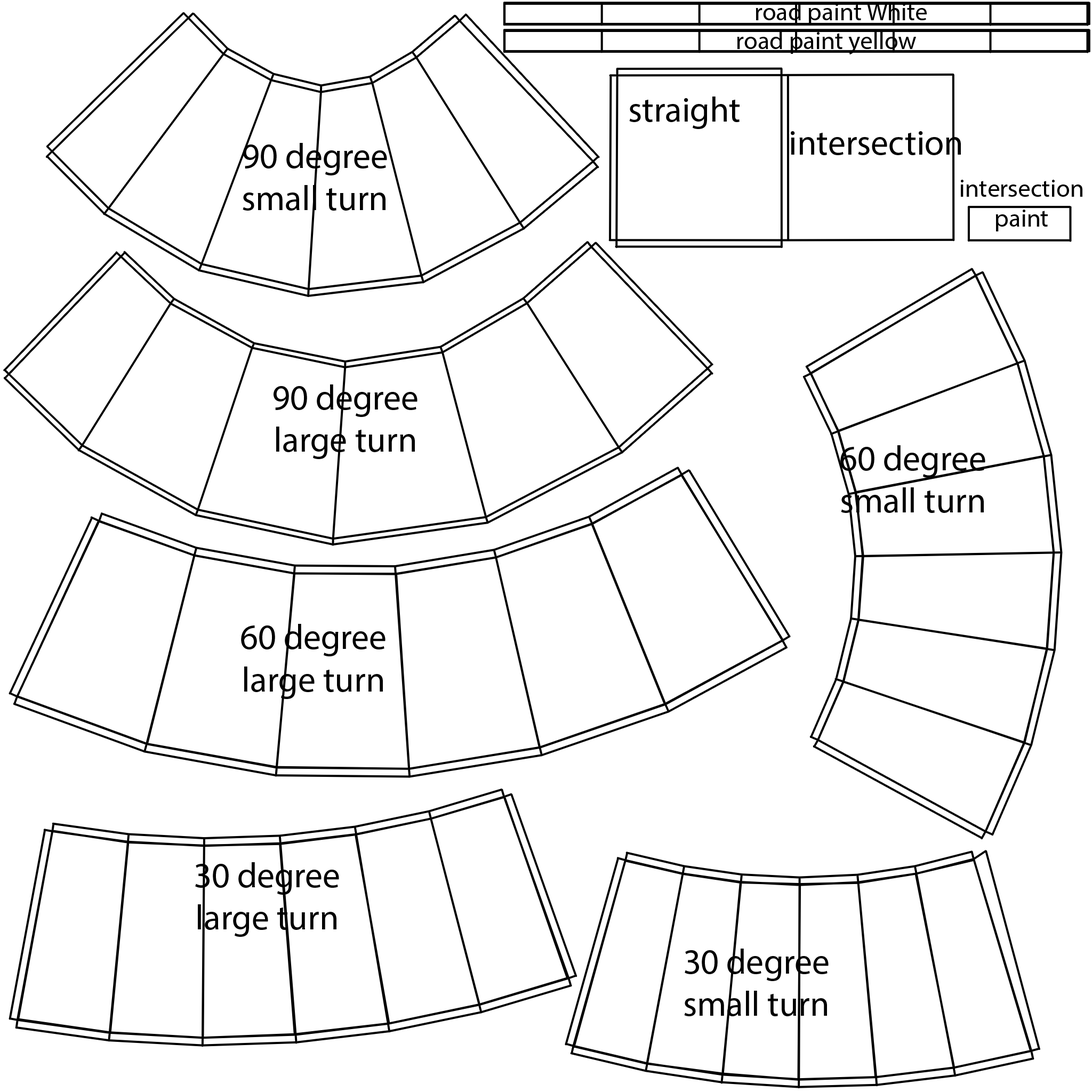
<style>
.page{position:relative;width:1092px;height:1092px;background:#ffffff}
.page>*{position:absolute;margin:0}
.t1{font:25.1px "MyriadPro-Regular";color:#000000}
.t2{font:35.2px "MyriadPro-Regular";color:#000000}
</style>
<div class="page">
<p class="t1" style="left:756px;top:2px;width:171px;height:23px">road paint White</p>
<p class="t1" style="left:737px;top:31px;width:179px;height:24px">road paint yellow</p>
<p class="t2" style="left:629px;top:97px;width:111px;height:32px">straight</p>
<p class="t2" style="left:791px;top:131px;width:170px;height:24px">intersection</p>
<p class="t2" style="left:243px;top:143px;width:144px;height:68px;text-align:center">90 degree<br>small turn</p>
<p class="t1" style="left:961px;top:180px;width:121px;height:51px;text-align:center">intersection<br>paint</p>
<p class="t2" style="left:274px;top:384px;width:143px;height:75px;text-align:center">90 degree<br>large turn</p>
<p class="t2" style="left:840px;top:445px;width:145px;height:68px;text-align:center">60 degree<br>small turn</p>
<p class="t2" style="left:241px;top:624px;width:145px;height:75px;text-align:center">60 degree<br>large turn</p>
<p class="t2" style="left:195px;top:862px;width:144px;height:75px;text-align:center">30 degree<br>large turn</p>
<p class="t2" style="left:684px;top:949px;width:145px;height:67px;text-align:center">30 degree<br>small turn</p>
</div>
